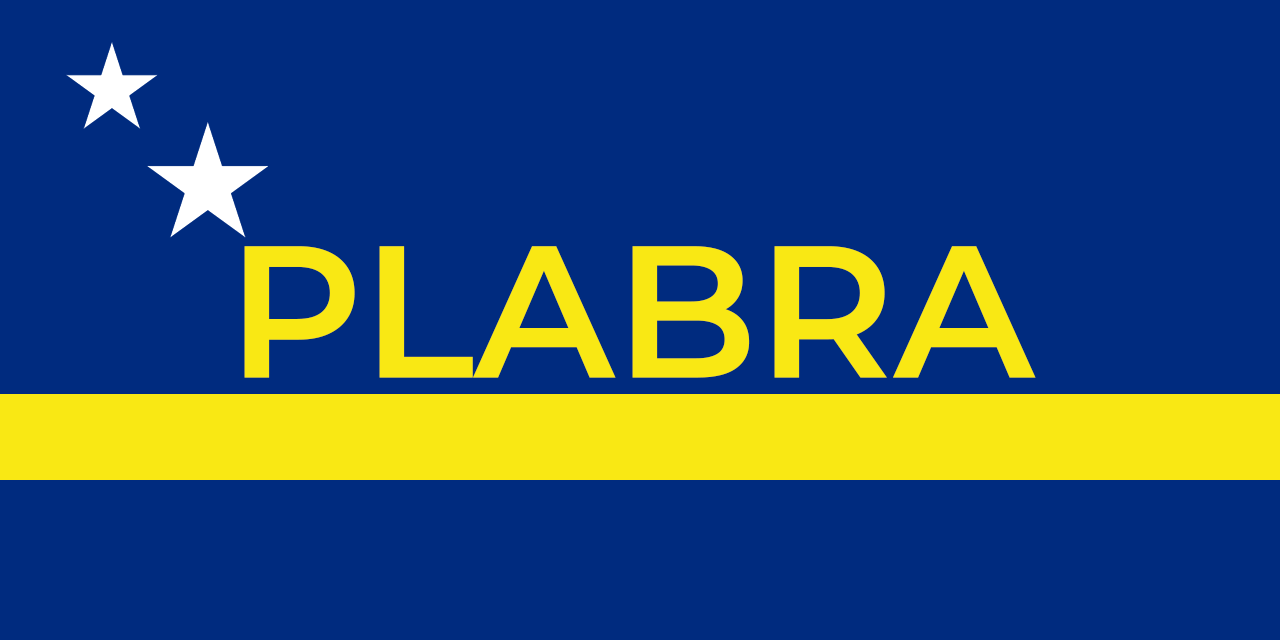
<style>
.page{position:relative;width:1280px;height:640px;background:#002b7f}
.page>*{position:absolute;margin:0}
.t1{font:187.5px "MontserratRoman-SemiBold";color:#f9e814}
</style>
<div class="page">
<p class="t1" style="left:244px;top:246px;width:792px;height:132px">PLABRA</p>
</div>
